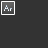
<style>
.page{position:relative;width:48px;height:48px;background:#333333}
.page>*{position:absolute;margin:0}
.t1{font:8.4px "Small Fonts"}
.t2{font:7.5px "Small Fonts";scale:0.9 1}
</style>
<div class="page">
<p class="t1" style="left:4px;top:5px;width:8px;height:6px">A<span class="t2">r</span></p>
</div>
